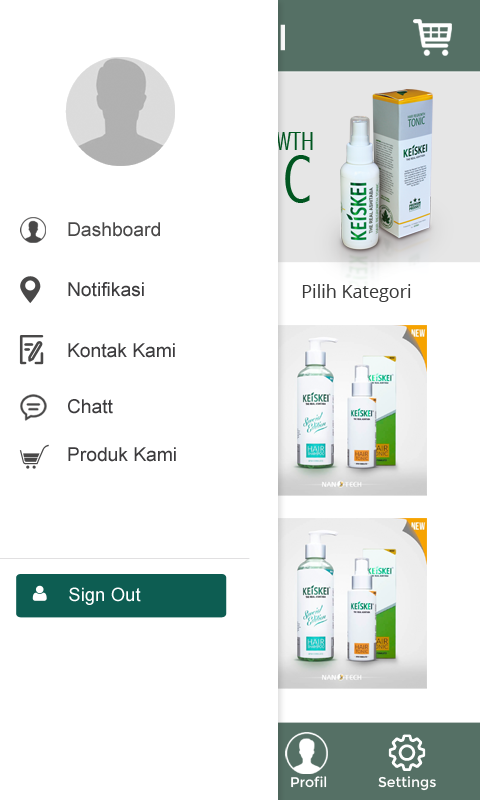
<style>
.page{position:relative;width:480px;height:800px;background:#ffffff}
.page>*{position:absolute;margin:0}
.t1{font:19.2px "ArialMT";color:#494848}
.t2{font:19.2px "ArialMT";color:#3c3b3d}
.t3{font:18px "OpenSans";color:#3a3a3a}
.t4{font:18.6px "ArialMT";color:#ffffff}
.t5{font:14px "Montserrat-Regular";color:#ffffff}
</style>
<div class="page">
<p class="t1" style="left:68px;top:222px;width:92px;height:15px">Dashboard</p>
<p class="t2" style="left:68px;top:282px;width:76px;height:15px">Notifikasi</p>
<p class="t3" style="left:302px;top:284px;width:109px;height:18px">Pilih Kategori</p>
<p class="t2" style="left:68px;top:343px;width:107px;height:15px">Kontak Kami</p>
<p class="t2" style="left:68px;top:399px;width:45px;height:15px">Chatt</p>
<p class="t2" style="left:68px;top:447px;width:108px;height:15px">Produk Kami</p>
<p class="t4" style="left:69px;top:587px;width:72px;height:18px">Sign Out</p>
<p class="t5" style="left:291px;top:776px;width:36px;height:12px">Profil</p>
<p class="t5" style="left:378px;top:776px;width:58px;height:15px">Settings</p>
</div>
